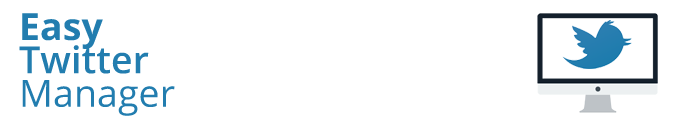
<style>
.page{position:relative;width:680px;height:120px;background:#ffffff}
.page>*{position:absolute;margin:0}
.t1{font:37.5px/33.3px "OpenSans-Semibold";color:#227daf}
.t2{font:37.5px/33.3px "OpenSans-Bold";color:#227daf}
.t3{font:37.5px/33.3px "OpenSans";color:#227daf}
</style>
<div class="page">
<p class="t1" style="left:19px;top:13px;width:156px;height:103px"><span class="t2">Easy<br></span>Twitter<br><span class="t3">Manager</span></p>
</div>
